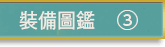
<style>
.page{position:relative;width:165px;height:47px;background:#569f9c}
.page>*{position:absolute;margin:0}
.t1{font:20px "GothicMB101Pro-Regular";color:#f2ebe5;scale:0.95 1}
</style>
<div class="page">
<p class="t1" style="left:19px;top:10px;width:76px;height:20px">裝備圖鑑</p>
</div>
